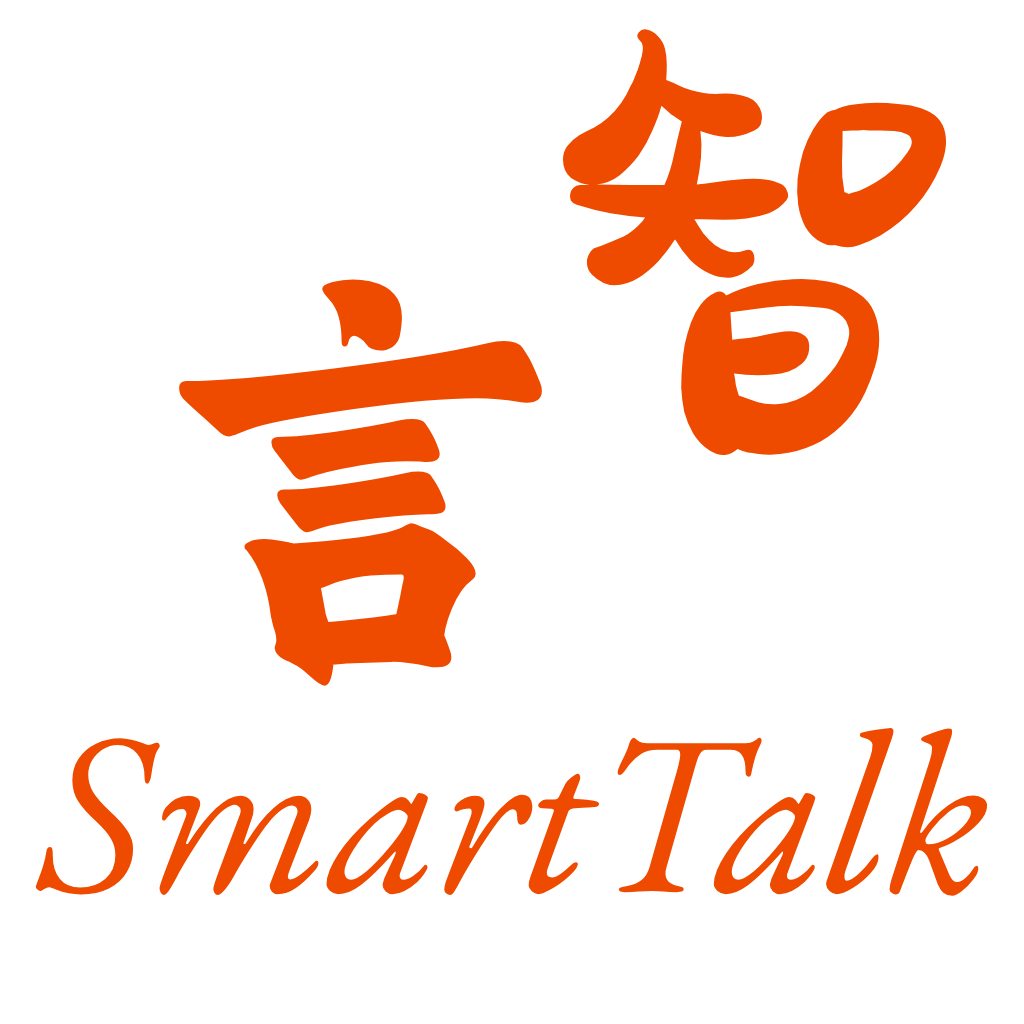
<style>
.page{position:relative;width:1024px;height:1024px;background:#ffffff}
.page>*{position:absolute;margin:0}
.t1{font:600px "HuXiaoBao-SaoBao";color:#ee4b00}
.t2{font:450px "SJbangshujianti-Regular";color:#ee4b00}
.t3{font:230px "EBGaramond-Italic";color:#ee4b00}
</style>
<div class="page">
<p class="t1" style="left:563px;top:28px;width:387px;height:429px">智</p>
<p class="t2" style="left:179px;top:279px;width:363px;height:407px">言</p>
<p class="t3" style="left:35px;top:727px;width:953px;height:169px">SmartTalk</p>
</div>
